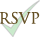
<style>
.page{position:relative;width:40px;height:37px;background:#ffffff}
.page>*{position:absolute;margin:0}
.t1{font:15.2px "TrajanPro-Regular";color:#644f23}
</style>
<div class="page">
<p class="t1" style="left:0px;top:11px;width:40px;height:13px">RSVP</p>
</div>
